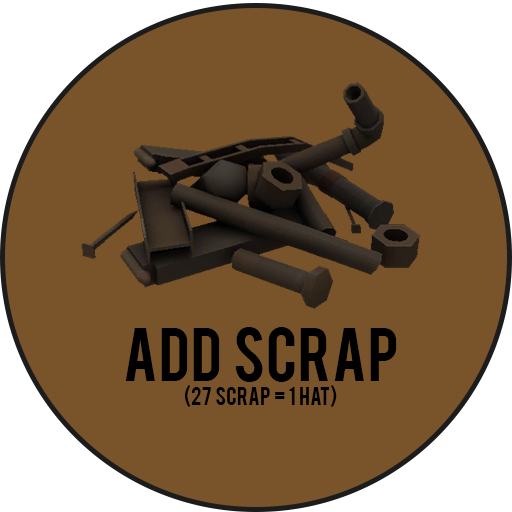
<style>
.page{position:relative;width:512px;height:512px;background:#79542b}
.page>*{position:absolute;margin:0}
.t1{font:20px "Bebas";color:#000000}
.t2{font:60px "Bebas";color:#000000}
</style>
<div class="page">
<p class="t1" style="left:125px;top:327px;width:272px;height:80px"><span class="t2">Add  scrap<br></span>                                 (27  scrap  =  1  hat)</p>
</div>
